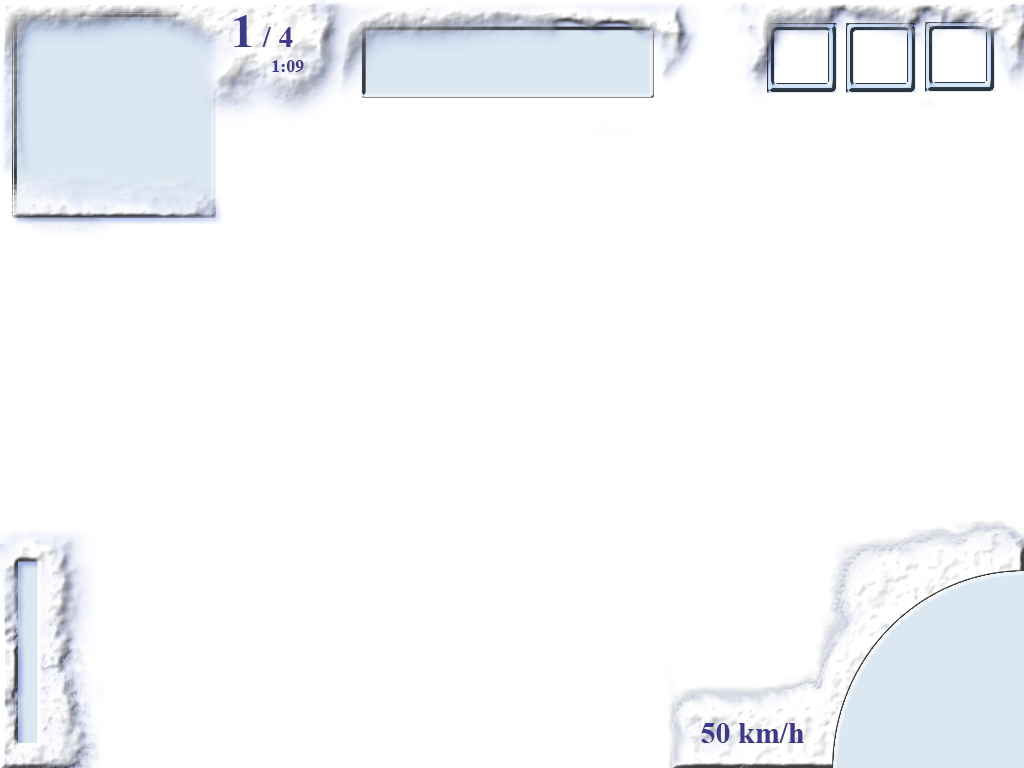
<style>
.page{position:relative;width:1024px;height:768px;background:#ffffff}
.page>*{position:absolute;margin:0}
.t1{font:30px "TimesNewRomanPS-BoldMT";color:#3d398c}
.t2{font:48px "TimesNewRomanPS-BoldMT";color:#3d398c}
.t3{font:18px "TimesNewRomanPS-BoldMT";color:#3d398c}
</style>
<div class="page">
<p class="t1" style="left:234px;top:15px;width:59px;height:32px"><span class="t2">1</span> / 4</p>
<p class="t3" style="left:272px;top:60px;width:32px;height:12px">1:09</p>
<p class="t1" style="left:701px;top:723px;width:103px;height:20px">50 km/h</p>
</div>
